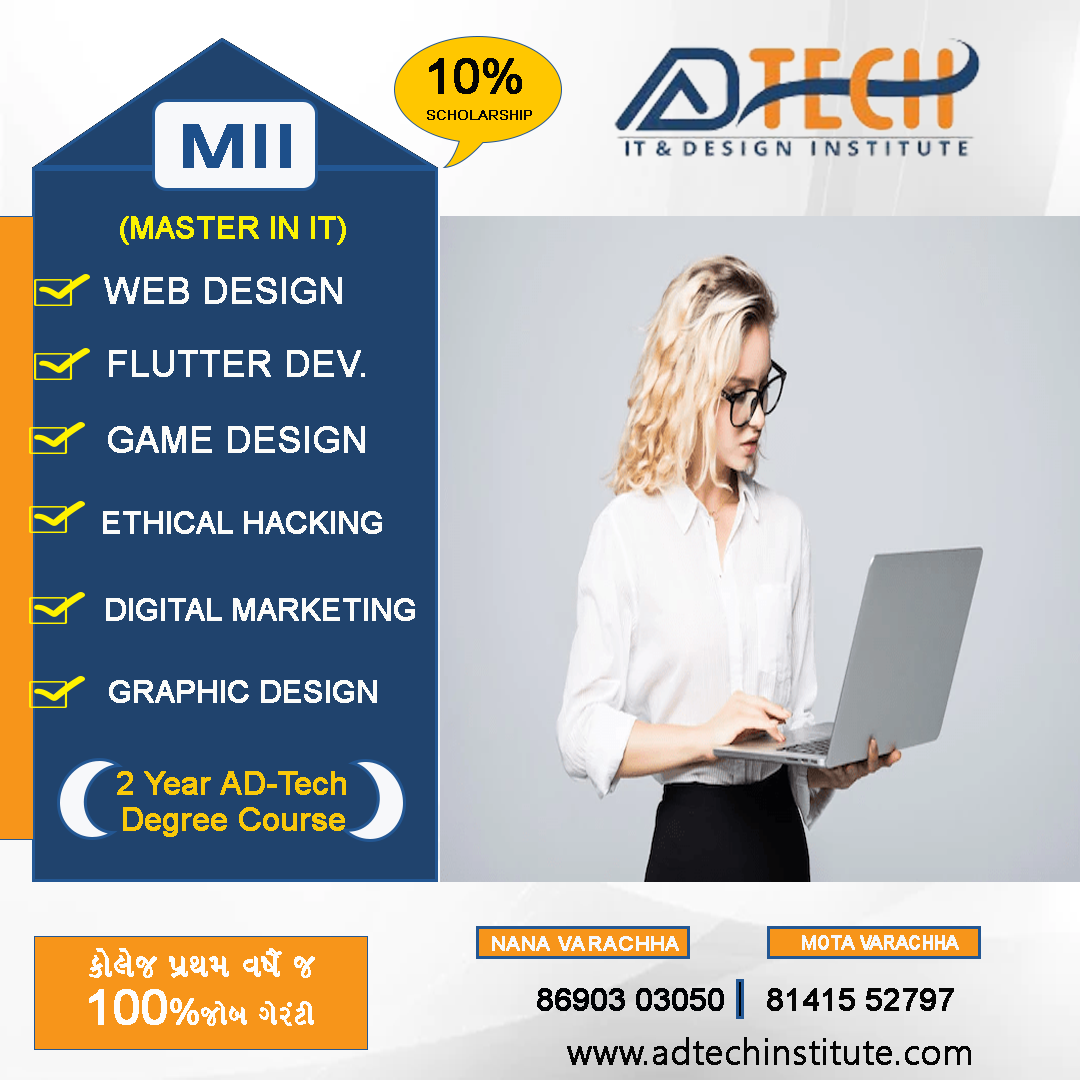
<style>
.page{position:relative;width:1080px;height:1080px;background:#20436d}
.page>*{position:absolute;margin:0}
.t1{font:48px "ArialMT";color:#050505;font-weight:bold}
.t2{font:14px "ArialMT";color:#050505;font-weight:bold}
.t3{font:60px "ArialMT";color:#1d4f8a;font-weight:bold;scale:1.36 1}
.t4{font:30px "ArialMT";color:#fbf304;font-weight:bold}
.t5{font:36px "ArialMT";color:#fbfbf9;font-weight:bold}
.t6{font:30px "ArialMT";color:#fbfbf9;font-weight:bold}
.t7{font:32px "ArialMT";color:#f9c90a;font-weight:bold}
.t8{font:19.1px "ArialMT";color:#f7f8fa;font-weight:bold;scale:1.11 1}
.t9{font:19.5px "ArialMT";color:#f7f8fa;font-weight:bold;scale:0.88 1}
.t10{font:36px "EKLG-10";color:#fefdfb;font-weight:bold}
.t11{font:30px "EKLG-10";color:#fefdfb;font-weight:bold}
.t12{font:48px "ArialMT";color:#fefdfb;font-weight:bold}
.t13{font:36px "ArialMT";color:#fefdfb;font-weight:bold}
.t14{font:30px "ArialMT";color:#000205;font-weight:bold}
.t15{font:30px "ArialMT";color:#050505;font-weight:bold}
.t16{font:36px "NirmalaUI-Semilight";color:#040404;font-weight:bold}
</style>
<div class="page">
<p class="t1" style="left:429px;top:58px;width:93px;height:36px">10%</p>
<p class="t2" style="left:427px;top:110px;width:105px;height:10px">SCHOLARSHIP</p>
<p class="t3" style="left:183px;top:124px;width:108px;height:44px">MII</p>
<p class="t4" style="left:120px;top:216px;width:226px;height:29px">(MASTER IN IT)</p>
<p class="t5" style="left:104px;top:277px;width:238px;height:27px">WEB DESIGN</p>
<p class="t5" style="left:109px;top:350px;width:256px;height:27px">FLUTTER DEV.</p>
<p class="t5" style="left:108px;top:426px;width:257px;height:27px">GAME DESIGN</p>
<p class="t6" style="left:103px;top:511px;width:279px;height:23px">ETHICAL HACKING</p>
<p class="t6" style="left:106px;top:598px;width:309px;height:23px">DIGITAL MARKETING</p>
<p class="t6" style="left:109px;top:680px;width:268px;height:23px">GRAPHIC DESIGN</p>
<p class="t7" style="left:117px;top:771px;width:229px;height:24px">2 Year AD-Tech</p>
<p class="t7" style="left:123px;top:807px;width:222px;height:30px">Degree Course</p>
<p class="t8" style="left:492px;top:936px;width:187px;height:15px">NANA VARACHHA</p>
<p class="t9" style="left:802px;top:935px;width:157px;height:15px">MOTA VARACHHA</p>
<p class="t10" style="left:89px;top:948px;width:226px;height:30px">ftujtus vt{:tbt JtMtI s</p>
<p class="t11" style="left:89px;top:989px;width:225px;height:37px"><span class="t12">100</span><span class="t13">%</span>stuct dtuhkxe</p>
<p class="t14" style="left:537px;top:988px;width:187px;height:23px">86903 03050</p>
<p class="t15" style="left:767px;top:988px;width:187px;height:23px">81415 52797</p>
<p class="t16" style="left:567px;top:1037px;width:404px;height:28px">www.adtechinstitute.com</p>
</div>
